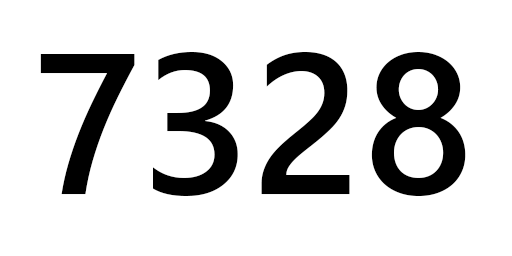
<style>
.page{position:relative;width:512px;height:256px;background:#ffffff}
.page>*{position:absolute;margin:0}
.t1{font:200px "YuGothicUI-Bold";color:#000000}
</style>
<div class="page">
<p class="t1" style="left:40px;top:52px;width:426px;height:144px">7328</p>
</div>
